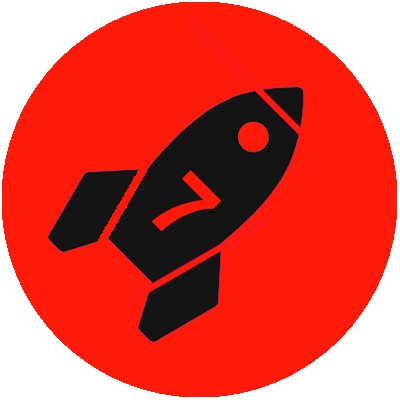
<style>
.page{position:relative;width:400px;height:400px;background:#fe1a09}
.page>*{position:absolute;margin:0}
.t1{font:91px "HelveticaNeue-Bold";letter-spacing:0.05em;color:#fe1a09}
</style>
<div class="page">
<p class="t1" style="left:151px;top:170px;width:71px;height:62px;rotate:45deg">7</p>
</div>
